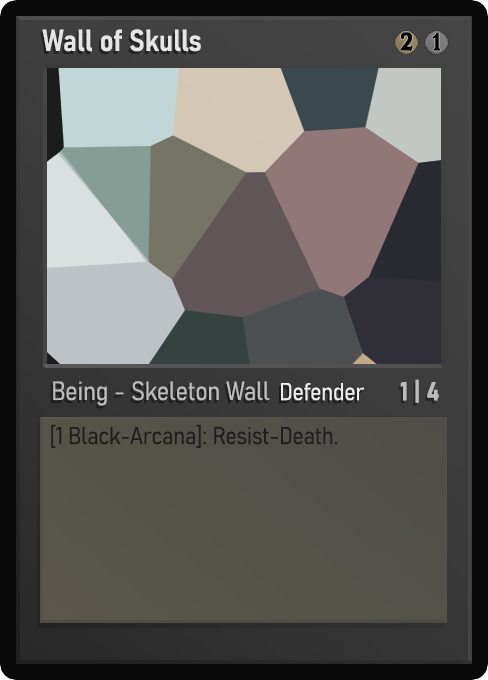
<style>
.page{position:relative;width:488px;height:680px}
.page>*{position:absolute;margin:0}
.t1{font:30px "Bahnschrift-SemiBoldSemiCondensed";color:#f2f2f2;font-weight:bold}
.t2{font:25px "WTRRoycroft";color:#000000;font-weight:bold;scale:1.09 1}
.t3{font:26px "Bahnschrift-LightSemiCondensed";color:#c8c8c8;font-weight:bold}
.t4{font:24px "Bahnschrift-LightSemiCondensed";color:#f0efef;font-weight:bold}
.t5{font:26px "Bahnschrift-BoldSemiCondensed";color:#bdbdbd;font-weight:bold}
.t6{font:24px "Bahnschrift-LightSemiCondensed";color:#1e1e1e;font-weight:bold}
</style>
<div class="page">
<p class="t1" style="left:42px;top:29px;width:159px;height:23px;opacity:0.9">Wall of Skulls</p>
<p class="t2" style="left:400px;top:32px;width:13px;height:19px">2</p>
<p class="t2" style="left:432px;top:32px;width:9px;height:19px">1</p>
<p class="t3" style="left:53px;top:381px;width:217px;height:25px;opacity:0.9">Being - Skeleton Wall</p>
<p class="t4" style="left:281px;top:383px;width:84px;height:18px">Defender</p>
<p class="t5" style="left:400px;top:379px;width:39px;height:24px">1 | 4</p>
<p class="t6" style="left:51px;top:424px;width:287px;height:24px">[1 Black-Arcana]: Resist-Death.</p>
</div>
